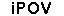
<style>
.page{position:relative;width:64px;height:16px;background:#ffffff}
.page>*{position:absolute;margin:0}
.t1{font:17.3px "ArialRoundedMTBold";letter-spacing:-0.025em;color:#000000}
</style>
<div class="page">
<p class="t1" style="left:12px;top:2px;width:39px;height:12px">iPOV</p>
</div>
